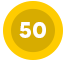
<style>
.page{position:relative;width:64px;height:60px;background:#ffcc00}
.page>*{position:absolute;margin:0}
.t1{font:22px "MADETOMMY-Bold";color:#ffffff}
</style>
<div class="page">
<p class="t1" style="left:19px;top:22px;width:27px;height:16px">50</p>
</div>
